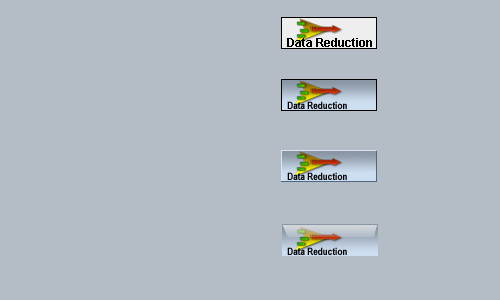
<style>
.page{position:relative;width:500px;height:300px;background:#b4bcc5}
.page>*{position:absolute;margin:0}
.t1{font:12px "Arial-BoldMT";color:#000000}
.t2{font:10px "ArialNarrow-Bold";color:#000000}
</style>
<div class="page">
<p class="t1" style="left:287px;top:38px;width:85px;height:9px">Data Reduction</p>
<p class="t2" style="left:287px;top:101px;width:60px;height:8px">Data Reduction</p>
<p class="t2" style="left:287px;top:172px;width:60px;height:8px">Data Reduction</p>
<p class="t2" style="left:287px;top:247px;width:60px;height:8px">Data Reduction</p>
</div>
